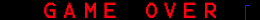
<style>
.page{position:relative;width:260px;height:20px;background:#000000}
.page>*{position:absolute;margin:0}
.t1{font:17.3px "Terminal";color:#ff0012}
</style>
<div class="page">
<p class="t1" style="left:44px;top:2px;width:12px;height:16px">G</p>
<p class="t1" style="left:64px;top:2px;width:11px;height:16px">A</p>
<p class="t1" style="left:85px;top:2px;width:11px;height:16px">M</p>
<p class="t1" style="left:104px;top:2px;width:12px;height:16px">E</p>
<p class="t1" style="left:146px;top:2px;width:11px;height:16px">O</p>
<p class="t1" style="left:164px;top:2px;width:12px;height:16px">V</p>
<p class="t1" style="left:184px;top:2px;width:11px;height:16px">E</p>
<p class="t1" style="left:205px;top:2px;width:11px;height:16px">R</p>
</div>
